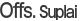
<style>
.page{position:relative;width:82px;height:21px;background:#ffffff}
.page>*{position:absolute;margin:0}
.t1{font:16px "GothicMB101Pro-Medium";letter-spacing:-0.07em;color:#373535;scale:0.8 1}
.t2{font:20px "GothicMB101Pro-Medium";letter-spacing:-0.08em;color:#373535;scale:0.8 1}
</style>
<div class="page">
<p class="t1" style="left:0px;top:2px;width:77px;height:18px"><span class="t2">Offs.</span> Suplai</p>
</div>
